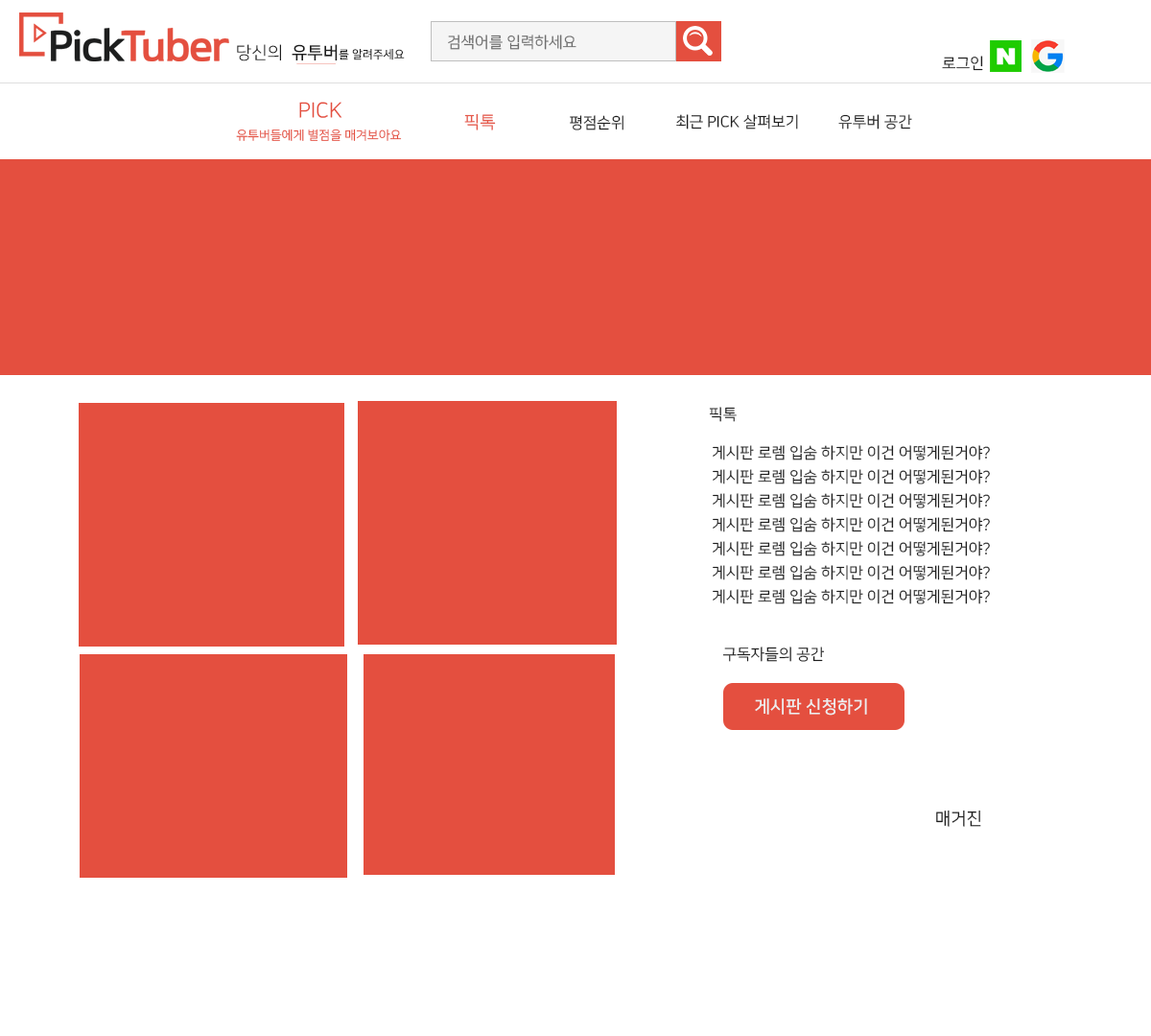
<style>
.page{position:relative;width:1151px;height:1036px;background:#ffffff}
.page>*{position:absolute;margin:0}
.t1{font:15.3px "NanumSquareR";color:#6e6e6e}
.t2{font:11.5px "NanumSquareB";color:#1e1e1e}
.t3{font:17.3px "NanumSquareR";color:#1e1e1e}
.t4{font:17.3px "NanumSquareB";color:#1e1e1e}
.t5{font:15.3px "NanumSquareR";color:#1e1e1e}
.t6{font:21.1px "NanumSquareR";color:#e44f3f}
.t7{font:17.3px "NanumSquareR";color:#e5594a}
.t8{font:12.5px "NanumSquareR";color:#e44f3f}
.t9{font:17.3px "NanumSquareB";color:#ededed}
</style>
<div class="page">
<p class="t1" style="left:448px;top:35px;width:128px;height:15px">검색어를 입력하세요</p>
<p class="t2" style="left:237px;top:44px;width:168px;height:17px"><span class="t3">당신의  </span><span class="t4">유투버</span>를 알려주세요</p>
<p class="t5" style="left:942px;top:56px;width:41px;height:15px">로그인</p>
<p class="t6" style="left:299px;top:102px;width:43px;height:16px">PICK</p>
<p class="t7" style="left:464px;top:113px;width:32px;height:17px">픽톡</p>
<p class="t5" style="left:570px;top:115px;width:53px;height:15px">평점순위</p>
<p class="t5" style="left:676px;top:114px;width:122px;height:15px">최근 PICK 살펴보기</p>
<p class="t5" style="left:838px;top:114px;width:74px;height:15px">유투버 공간</p>
<p class="t8" style="left:236px;top:129px;width:166px;height:12px">유투버들에게 별점을 매겨보아요</p>
<p class="t5" style="left:709px;top:407px;width:28px;height:15px">픽톡</p>
<p class="t5" style="left:713px;top:445px;width:277px;height:15px">게시판 로렘 입숨 하지만 이건 어떻게된거야?</p>
<p class="t5" style="left:713px;top:469px;width:277px;height:15px">게시판 로렘 입숨 하지만 이건 어떻게된거야?</p>
<p class="t5" style="left:713px;top:493px;width:277px;height:15px">게시판 로렘 입숨 하지만 이건 어떻게된거야?</p>
<p class="t5" style="left:713px;top:517px;width:277px;height:15px">게시판 로렘 입숨 하지만 이건 어떻게된거야?</p>
<p class="t5" style="left:713px;top:541px;width:277px;height:15px">게시판 로렘 입숨 하지만 이건 어떻게된거야?</p>
<p class="t5" style="left:713px;top:565px;width:277px;height:15px">게시판 로렘 입숨 하지만 이건 어떻게된거야?</p>
<p class="t5" style="left:713px;top:589px;width:277px;height:15px">게시판 로렘 입숨 하지만 이건 어떻게된거야?</p>
<p class="t5" style="left:722px;top:647px;width:103px;height:15px">구독자들의 공간</p>
<p class="t9" style="left:755px;top:698px;width:112px;height:18px">게시판 신청하기</p>
<p class="t3" style="left:936px;top:810px;width:45px;height:17px">매거진</p>
</div>
